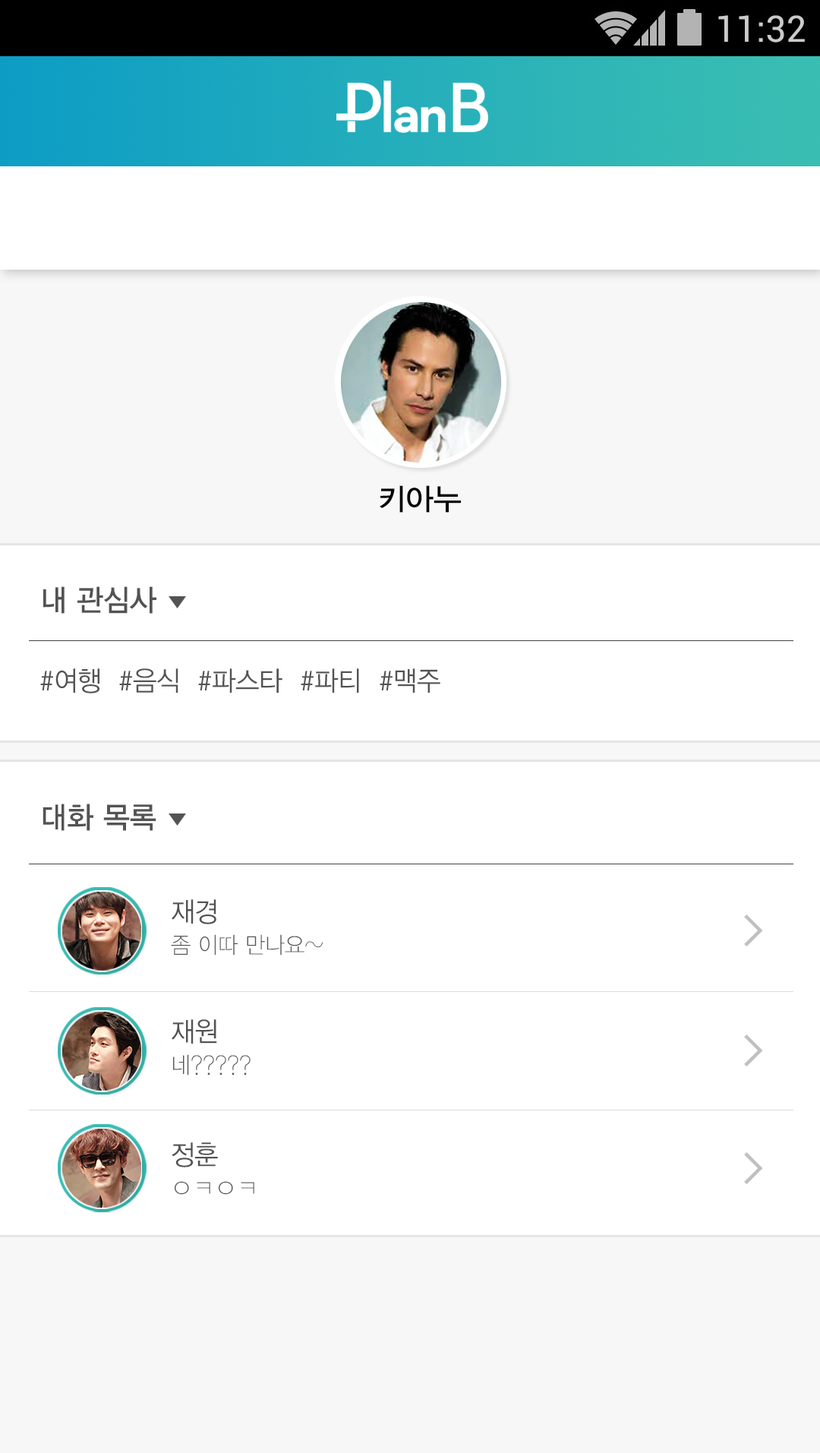
<style>
.page{position:relative;width:820px;height:1453px;background:#ffffff}
.page>*{position:absolute;margin:0}
.t1{font:30.4px "YDIYGO330";color:#010101}
.t2{font:30.4px "YDIYGO330";color:#535353;scale:0.95 1}
.t3{font:27.3px "YDIYGO320";color:#535353;scale:0.95 1}
.t4{font:22.8px "YDIYGO310";color:#535353;scale:0.95 1}
</style>
<div class="page">
<p class="t1" style="left:380px;top:485px;width:81px;height:28px">키아누</p>
<p class="t2" style="left:43px;top:586px;width:114px;height:28px">내 관심사</p>
<p class="t3" style="left:40px;top:669px;width:401px;height:25px">#여행  #음식  #파스타  #파티  #맥주</p>
<p class="t2" style="left:43px;top:804px;width:114px;height:27px">대화 목록</p>
<p class="t3" style="left:172px;top:899px;width:45px;height:26px">재경</p>
<p class="t4" style="left:171px;top:934px;width:153px;height:22px">좀 이따 만나요~</p>
<p class="t3" style="left:172px;top:1020px;width:45px;height:24px">재원</p>
<p class="t4" style="left:173px;top:1054px;width:78px;height:22px">네?????</p>
<p class="t3" style="left:172px;top:1143px;width:46px;height:25px">정훈</p>
<p class="t4" style="left:175px;top:1181px;width:80px;height:14px">ㅇㅋㅇㅋ</p>
</div>
